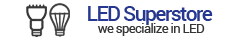
<style>
.page{position:relative;width:240px;height:40px;background:#ffffff}
.page>*{position:absolute;margin:0}
.t1{font:36.1px "Roboto-Medium";letter-spacing:-0.075em;color:#26378f}
.t2{font:22.4px "Roboto-Regular";letter-spacing:-0.05em;color:#353535}
</style>
<div class="page">
<p class="t1" style="left:88px;top:6px;width:125px;height:19px">LED Superstore</p>
<p class="t2" style="left:97px;top:23px;width:108px;height:13px">we specialize in LED</p>
</div>
